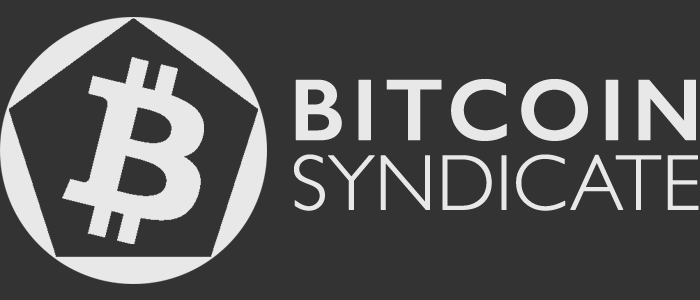
<style>
.page{position:relative;width:700px;height:300px;background:#333333}
.page>*{position:absolute;margin:0}
.t1{font:87.5px "GillSans-SemiBold";letter-spacing:0.06em;color:#e8e8e8;font-weight:bold}
.t2{font:79.2px "GillSans-Light";letter-spacing:-0.02em;color:#e8e8e8;font-weight:bold}
</style>
<div class="page">
<p class="t1" style="left:295px;top:79px;width:401px;height:62px">BITCOIN</p>
<p class="t2" style="left:294px;top:154px;width:405px;height:57px">SYNDICATE</p>
</div>
